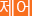
<style>
.page{position:relative;width:32px;height:16px;background:#f86f1e}
.page>*{position:absolute;margin:0}
.t1{font:16.7px "MalgunGothic";color:#ffffff}
</style>
<div class="page">
<p class="t1" style="left:0px;top:0px;width:30px;height:16px">제어</p>
</div>
